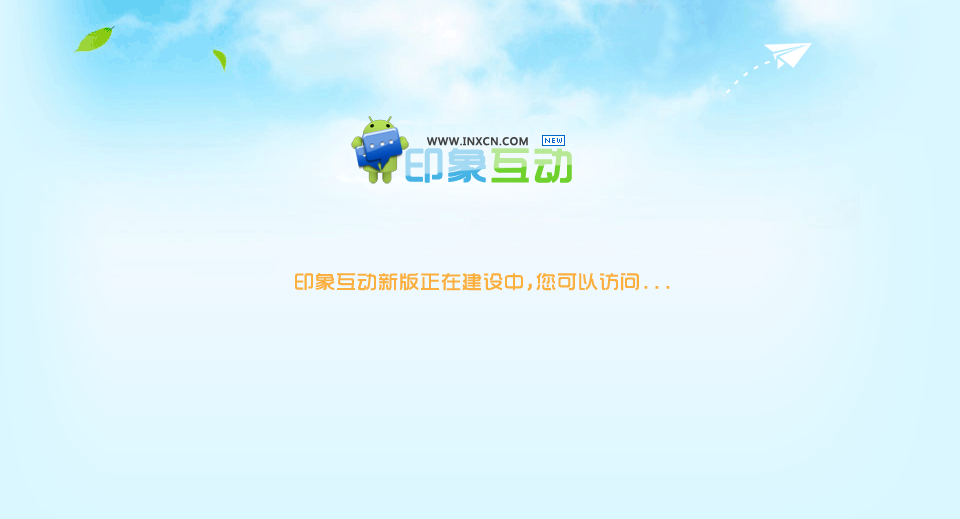
<style>
.page{position:relative;width:960px;height:519px}
.page>*{position:absolute;margin:0}
.t1{font:10px "MicrosoftYaHei";letter-spacing:0.05em;color:#414141;font-weight:bold}
.t2{font:40px "TRENDS";letter-spacing:0.05em;font-weight:bold}
.t3{font:20px "TRENDS";letter-spacing:0.05em;color:#fbaf3e}
</style>
<div class="page">
<p class="t1" style="left:427px;top:137px;width:101px;height:9px">WWW.INXCN.COM</p>
<p class="t2" style="left:405px;top:148px;width:167px;height:35px">印象互动</p>
<p class="t3" style="left:295px;top:273px;width:375px;height:18px">印象互动新版正在建设中,您可以访问...</p>
</div>
